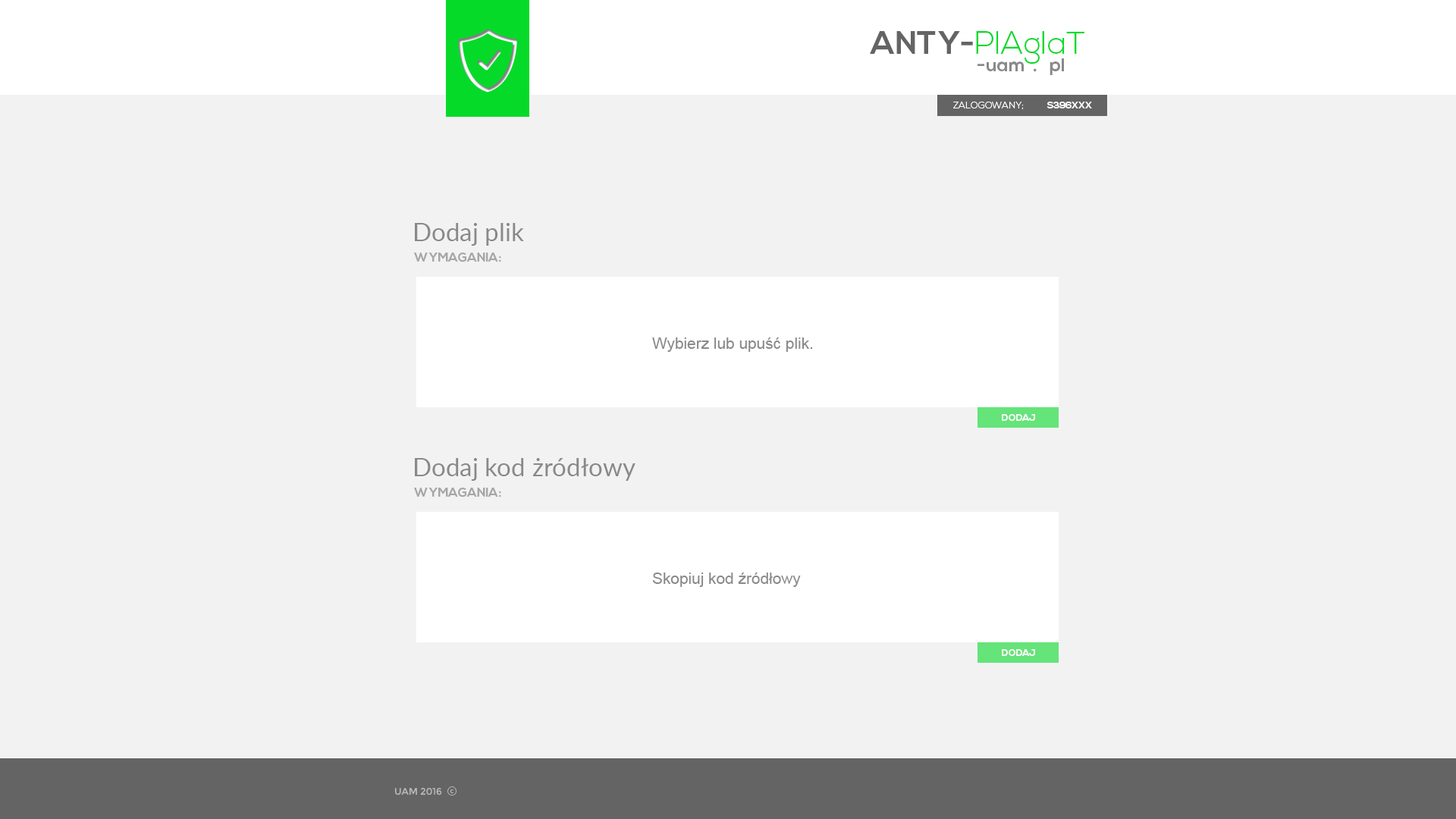
<style>
.page{position:relative;width:1456px;height:819px;background:#f2f2f2}
.page>*{position:absolute;margin:0}
.t1{font:31.6px "NexaLight";color:#06da29}
.t2{font:31.6px "NexaBold";color:#646464}
.t3{font:19px "NexaBold";color:#898989}
.t4{font:9.5px "NexaLight";color:#ffffff}
.t5{font:9.5px "NexaBold";color:#ffffff}
.t6{font:25.3px "Lato-Regular";color:#898989}
.t7{font:12.6px "NexaBold";color:#a6a6a6}
.t8{font:15.8px "ArialMT";color:#898989}
.t9{font:9.5px "Montserrat-Regular";color:#bababa}
.t10{font:9.5px "KozGoPr6N-Regular";color:#bababa}
</style>
<div class="page">
<p class="t1" style="left:870px;top:31px;width:214px;height:33px"><span class="t2">ANTY-</span>PlAgIaT</p>
<p class="t3" style="left:977px;top:58px;width:87px;height:17px">-uam  .   pl</p>
<p class="t4" style="left:953px;top:102px;width:139px;height:7px">ZALOGOWANY;      <span class="t5">    S396XXX</span></p>
<p class="t6" style="left:415px;top:223px;width:109px;height:23px">Dodaj plik</p>
<p class="t7" style="left:414px;top:253px;width:87px;height:9px">WYMAGANIA:</p>
<p class="t8" style="left:652px;top:337px;width:161px;height:15px">Wybierz lub upuść plik.</p>
<p class="t5" style="left:1002px;top:414px;width:33px;height:7px">DODAJ</p>
<p class="t6" style="left:415px;top:458px;width:220px;height:23px">Dodaj kod żródłowy</p>
<p class="t7" style="left:414px;top:488px;width:87px;height:9px">WYMAGANIA:</p>
<p class="t8" style="left:652px;top:573px;width:149px;height:14px">Skopiuj kod źródłowy</p>
<p class="t5" style="left:1002px;top:649px;width:33px;height:7px">DODAJ</p>
<p class="t9" style="left:394px;top:786px;width:63px;height:9px">UAM 2016  <span class="t10">ⓒ</span></p>
</div>
